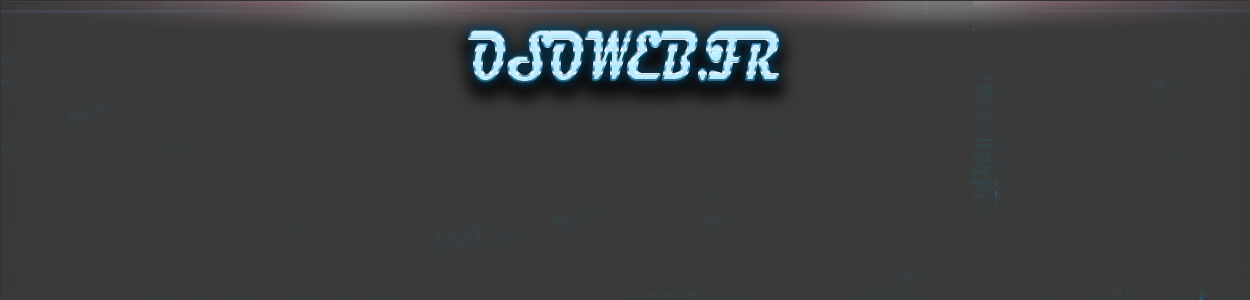
<style>
.page{position:relative;width:1250px;height:300px;background:#3a3a3a}
.page>*{position:absolute;margin:0}
.t1{font:72.4px "Magneto-Bold";scale:0.58 1}
</style>
<div class="page">
<p class="t1" style="left:468px;top:30px;width:311px;height:52px">OSOWEB.FR</p>
</div>
